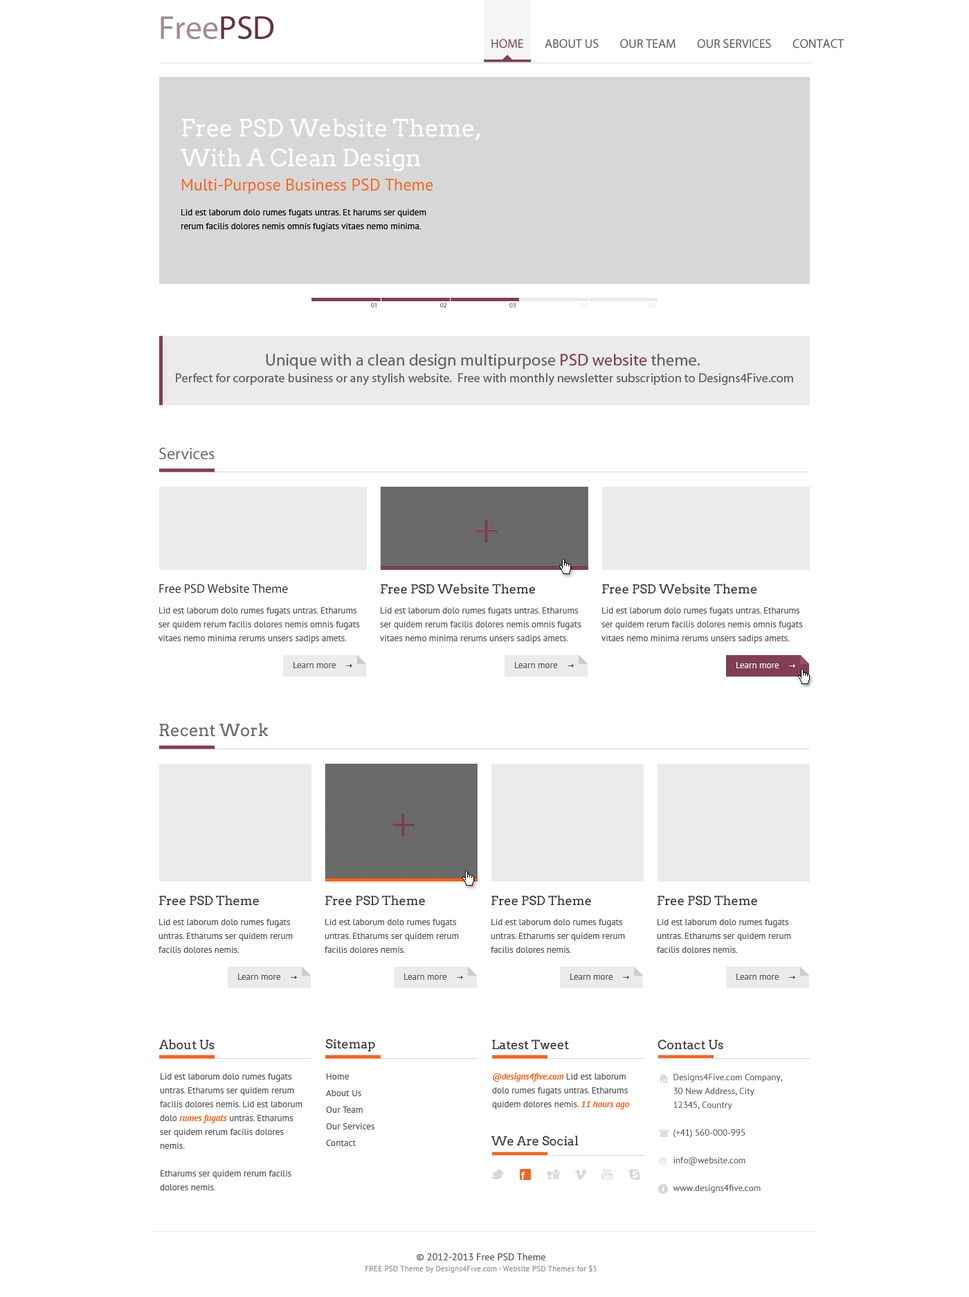
<style>
.page{position:relative;width:969px;height:1297px;background:#ffffff}
.page>*{position:absolute;margin:0}
.t1{font:33.2px "MyriadPro-Regular";color:#a18a91}
.t2{font:33.2px "MyriadPro-Regular";color:#643142}
.t3{font:12.5px "MyriadPro-Regular";color:#555555}
.t4{font:12.5px "MyriadPro-Regular";color:#803f53}
.t5{font:23.5px/26.3px "Arvo";color:#ffffff}
.t6{font:16.6px "PTSans-Regular";color:#f26522}
.t7{font:9px/13.8px "PTSans-Regular";color:#000000}
.t8{font:6.9px "MyriadPro-Regular";color:#803f53}
.t9{font:6.9px "PTSans-Bold";color:#ebebeb}
.t10{font:12.5px/16.6px "MyriadPro-Regular";letter-spacing:0.01em;color:#606060}
.t11{font:16.6px/16.6px "MyriadPro-Regular";letter-spacing:0.01em;color:#606060}
.t12{font:16.6px/16.6px "MyriadPro-Regular";letter-spacing:0.01em;color:#803f53}
.t13{font:16.6px "MyriadPro-Regular";color:#686868}
.t14{font:12.5px "MyriadPro-Regular";color:#363636}
.t15{font:12.5px "Arvo";color:#363636}
.t16{font:9px/13.8px "PTSans-Regular";color:#555555}
.t17{font:9px "PTSans-Regular";color:#555555}
.t18{font:9px "PTSans-Regular";color:#ffffff}
.t19{font:16.6px "Arvo";color:#686868}
.t20{font:9px/13.8px "PTSans-BoldItalic";color:#f26522}
.t21{font:9px/16.6px "PTSans-Regular";letter-spacing:0.01em;color:#555555}
.t22{font:9px/13.8px "PTSans-Regular";color:#414141}
.t23{font:7.6px/11.1px "PTSans-Regular";letter-spacing:0.025em;color:#959595}
.t24{font:9.7px/11.1px "PTSans-Regular";letter-spacing:0.01em;color:#555555}
</style>
<div class="page">
<p class="t1" style="left:161px;top:16px;width:113px;height:23px">Free<span class="t2">PSD</span></p>
<p class="t3" style="left:492px;top:39px;width:352px;height:9px"><span class="t4">HOME        </span>ABOUT US        OUR TEAM        OUR SERVICES        CONTACT</p>
<p class="t5" style="left:181px;top:118px;width:299px;height:54px">Free PSD Website Theme,<br>With A Clean Design</p>
<p class="t6" style="left:182px;top:179px;width:251px;height:15px">Multi-Purpose Business PSD Theme</p>
<p class="t7" style="left:181px;top:209px;width:245px;height:22px">Lid est laborum dolo rumes fugats untras. Et harums ser quidem rerum facilis dolores nemis omnis fugiats vitaes nemo minima.</p>
<p class="t8" style="left:371px;top:303px;width:6px;height:4px">01</p>
<p class="t8" style="left:440px;top:303px;width:7px;height:4px">02</p>
<p class="t8" style="left:510px;top:303px;width:6px;height:4px">03</p>
<p class="t9" style="left:579px;top:303px;width:9px;height:4px">.04</p>
<p class="t9" style="left:648px;top:303px;width:9px;height:4px">.05</p>
<p class="t10" style="left:176px;top:354px;width:617px;height:32px;text-align:center"><span class="t11">Unique with a clean design multipurpose </span><span class="t12">PSD website</span><span class="t11"> theme. <br></span>Perfect for corporate business or any stylish website.  Free with monthly newsletter subscription to Designs4Five.com</p>
<p class="t13" style="left:159px;top:447px;width:56px;height:13px">Services</p>
<p class="t14" style="left:159px;top:584px;width:129px;height:9px">Free PSD Website Theme</p>
<p class="t15" style="left:381px;top:584px;width:154px;height:10px">Free PSD Website Theme</p>
<p class="t15" style="left:602px;top:584px;width:155px;height:10px">Free PSD Website Theme</p>
<p class="t16" style="left:159px;top:607px;width:201px;height:36px">Lid est laborum dolo rumes fugats untras. Etharums ser quidem rerum facilis dolores nemis omnis fugats vitaes nemo minima rerums unsers sadips amets.</p>
<p class="t16" style="left:380px;top:607px;width:202px;height:36px">Lid est laborum dolo rumes fugats untras. Etharums ser quidem rerum facilis dolores nemis omnis fugats vitaes nemo minima rerums unsers sadips amets.</p>
<p class="t16" style="left:602px;top:607px;width:201px;height:36px">Lid est laborum dolo rumes fugats untras. Etharums ser quidem rerum facilis dolores nemis omnis fugats vitaes nemo minima rerums unsers sadips amets.</p>
<p class="t17" style="left:294px;top:662px;width:42px;height:6px">Learn more</p>
<p class="t17" style="left:515px;top:662px;width:43px;height:6px">Learn more</p>
<p class="t18" style="left:737px;top:662px;width:43px;height:6px">Learn more</p>
<p class="t19" style="left:159px;top:723px;width:109px;height:14px">Recent Work</p>
<p class="t15" style="left:159px;top:895px;width:100px;height:11px">Free PSD Theme</p>
<p class="t15" style="left:325px;top:895px;width:100px;height:11px">Free PSD Theme</p>
<p class="t15" style="left:492px;top:895px;width:99px;height:11px">Free PSD Theme</p>
<p class="t15" style="left:658px;top:895px;width:99px;height:11px">Free PSD Theme</p>
<p class="t16" style="left:159px;top:919px;width:134px;height:34px">Lid est laborum dolo rumes fugats untras. Etharums ser quidem rerum facilis dolores nemis.</p>
<p class="t16" style="left:325px;top:919px;width:134px;height:34px">Lid est laborum dolo rumes fugats untras. Etharums ser quidem rerum facilis dolores nemis.</p>
<p class="t16" style="left:491px;top:919px;width:134px;height:34px">Lid est laborum dolo rumes fugats untras. Etharums ser quidem rerum facilis dolores nemis.</p>
<p class="t16" style="left:657px;top:919px;width:134px;height:34px">Lid est laborum dolo rumes fugats untras. Etharums ser quidem rerum facilis dolores nemis.</p>
<p class="t17" style="left:238px;top:973px;width:43px;height:7px">Learn more</p>
<p class="t17" style="left:404px;top:973px;width:43px;height:7px">Learn more</p>
<p class="t17" style="left:570px;top:973px;width:43px;height:7px">Learn more</p>
<p class="t17" style="left:737px;top:973px;width:43px;height:7px">Learn more</p>
<p class="t15" style="left:159px;top:1039px;width:56px;height:11px">About Us</p>
<p class="t15" style="left:325px;top:1038px;width:50px;height:14px">Sitemap</p>
<p class="t15" style="left:492px;top:1039px;width:77px;height:11px">Latest Tweet</p>
<p class="t15" style="left:658px;top:1039px;width:65px;height:11px">Contact Us</p>
<p class="t16" style="left:160px;top:1073px;width:143px;height:117px">Lid est laborum dolo rumes fugats untras. Etharums ser quidem rerum facilis dolores nemis. Lid est laborum dolo <span class="t20">rumes fugats</span> untras. Etharums ser quidem rerum facilis dolores nemis.<br><br>Etharums ser quidem rerum facilis dolores nemis.</p>
<p class="t21" style="left:326px;top:1073px;width:49px;height:73px">Home<br>About Us<br>Our Team<br>Our Services<br>Contact</p>
<p class="t16" style="left:492px;top:1072px;width:138px;height:37px"><span class="t20">@designs4five.com </span>Lid est laborum dolo rumes fugats untras. Etharums quidem dolores nemis. <span class="t20">11 hours ago</span></p>
<p class="t22" style="left:673px;top:1073px;width:109px;height:120px">Designs4Five.com Company,<br>30 New Address, City<br>12345, Country<br><br>(+41) 560-000-995<br><br>info@website.com<br><br>www.designs4five.com</p>
<p class="t15" style="left:492px;top:1135px;width:87px;height:11px">We Are Social</p>
<p class="t23" style="left:366px;top:1253px;width:231px;height:19px;text-align:center"><span class="t24">© 2012-2013 Free PSD Theme<br></span>FREE PSD Theme by Designs4Five.com - Website PSD Themes for $5</p>
</div>
